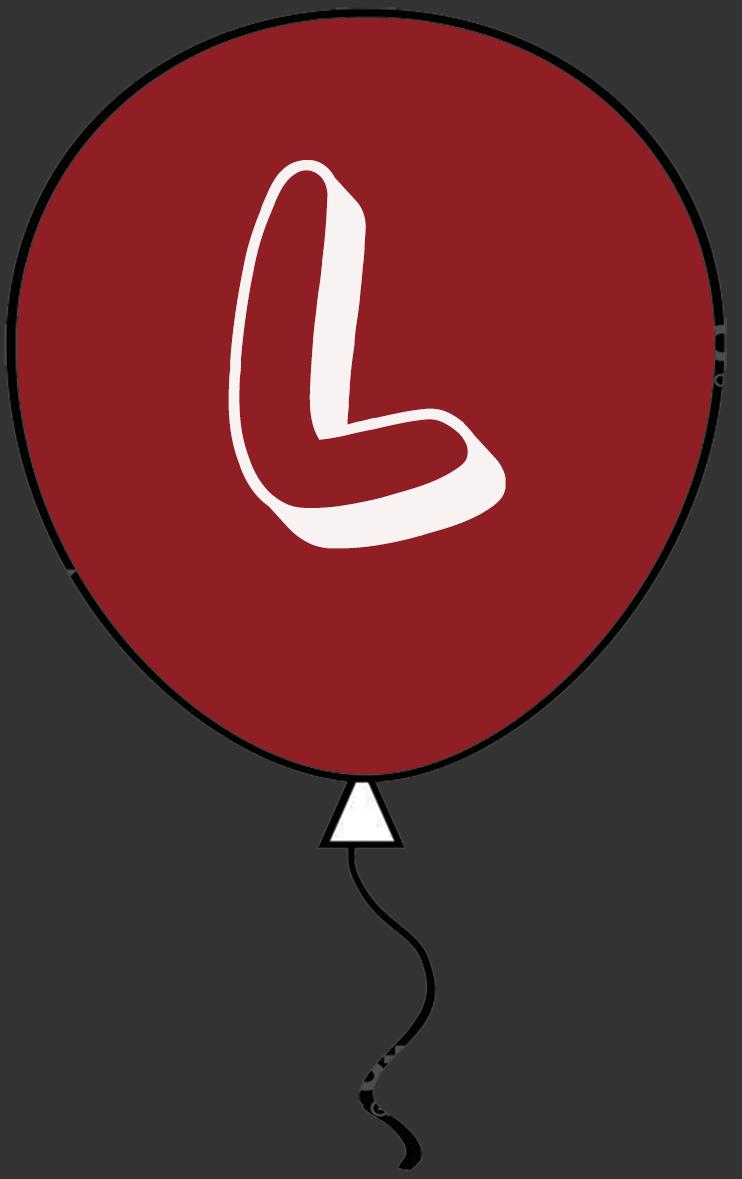
<style>
.page{position:relative;width:742px;height:1179px;background:#333333}
.page>*{position:absolute;margin:0}
.t1{font:500px "ActionManShaded";color:#f9f2f2}
</style>
<div class="page">
<p class="t1" style="left:228px;top:160px;width:278px;height:389px">L</p>
</div>
